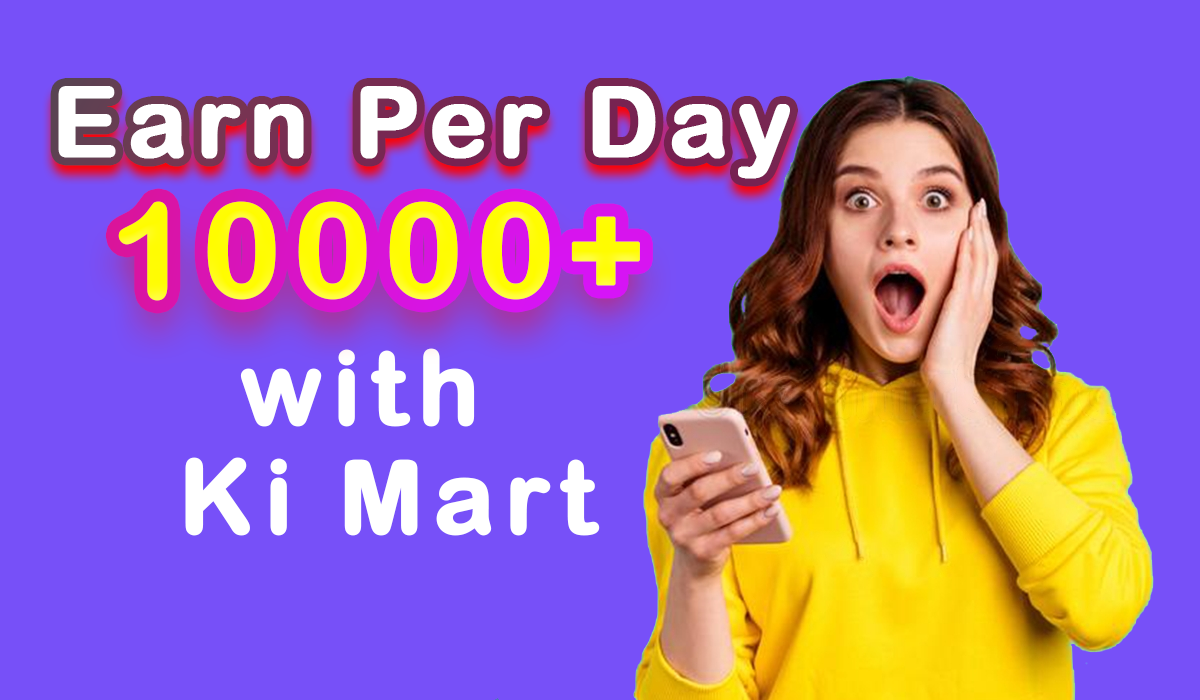
<style>
.page{position:relative;width:1200px;height:700px;background:#7750f8}
.page>*{position:absolute;margin:0}
.t1{font:97.7px "ArialRoundedMTBold";letter-spacing:0.08em;color:#ffffff;font-weight:bold}
.t2{font:130.2px "ArialRoundedMTBold";letter-spacing:0.08em;color:#fffc05;font-weight:bold}
.t3{font:101px "ArialRoundedMTBold";letter-spacing:0.08em;color:#ffffff;font-weight:bold}
</style>
<div class="page">
<p class="t1" style="left:58px;top:86px;width:732px;height:93px">Earn Per Day</p>
<p class="t2" style="left:118px;top:201px;width:522px;height:100px">10000+</p>
<p class="t3" style="left:240px;top:348px;width:235px;height:79px">with</p>
<p class="t3" style="left:185px;top:457px;width:415px;height:79px">Ki Mart</p>
</div>
